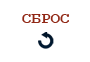
<style>
.page{position:relative;width:90px;height:62px;background:#ffffff}
.page>*{position:absolute;margin:0}
.t1{font:16px "CourierNewPS-BoldMT";color:#912816}
</style>
<div class="page">
<p class="t1" style="left:22px;top:14px;width:47px;height:9px">СБРОС</p>
</div>
